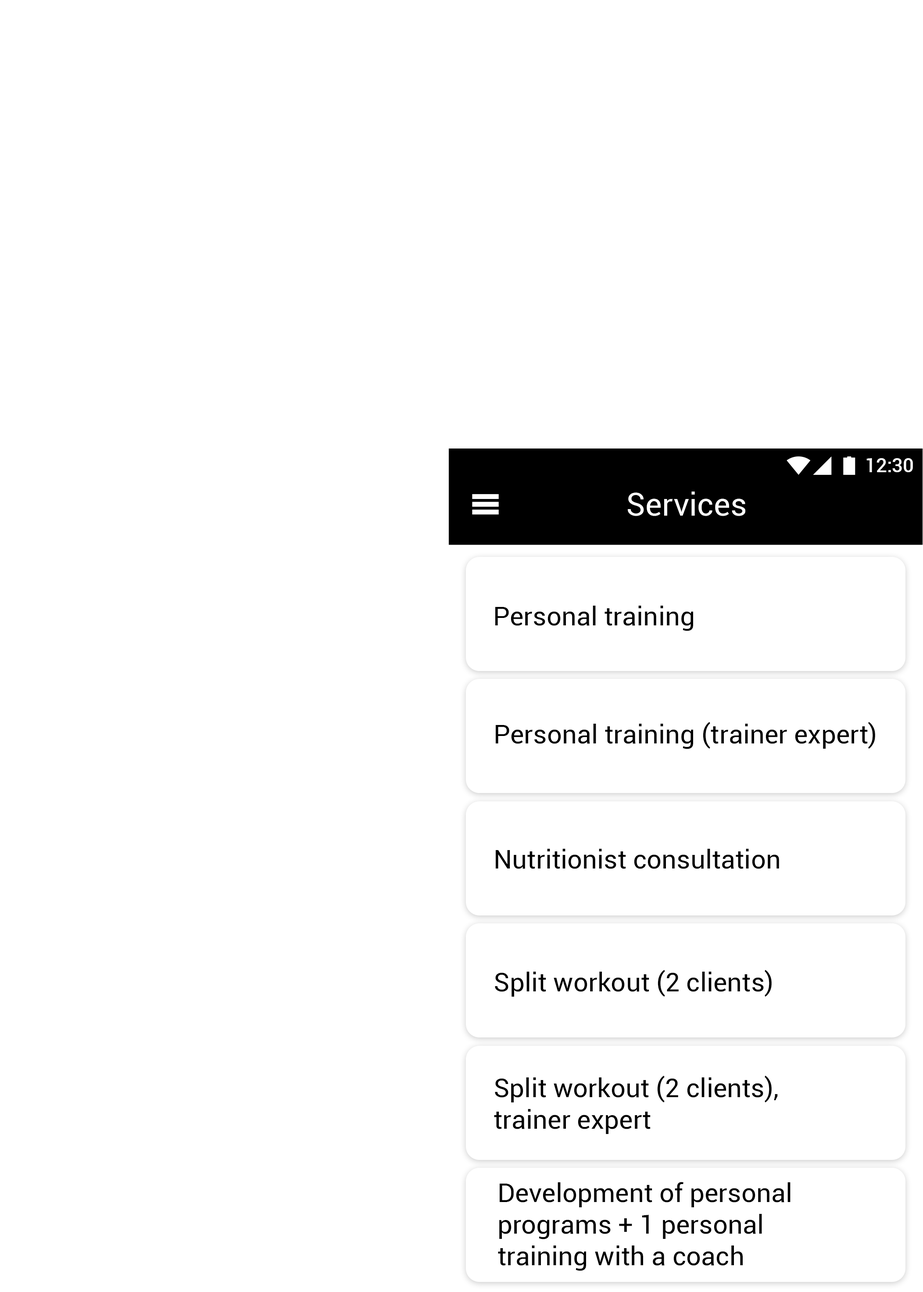
<style>
.page{position:relative;width:923px;height:1292px;background:#ffffff}
.page>*{position:absolute;margin:0}
.t1{font:19.3px "Roboto-Medium";color:#ffffff}
.t2{font:31.6px "Roboto-Regular";color:#ffffff}
.t3{font:26.3px "Roboto-Regular";color:#000000}
.t4{font:26.3px/31.6px "Roboto-Regular";color:#000000}
</style>
<div class="page">
<p class="t1" style="left:867px;top:458px;width:46px;height:14px">12:30</p>
<p class="t2" style="left:628px;top:491px;width:117px;height:25px">Services</p>
<p class="t3" style="left:495px;top:605px;width:198px;height:26px">Personal training</p>
<p class="t3" style="left:496px;top:722px;width:379px;height:27px">Personal training (trainer expert)</p>
<p class="t3" style="left:496px;top:849px;width:283px;height:20px">Nutritionist consultation</p>
<p class="t3" style="left:495px;top:970px;width:277px;height:26px">Split workout (2 clients)</p>
<p class="t4" style="left:494px;top:1075px;width:284px;height:59px">Split workout (2 clients), <br>trainer expert</p>
<p class="t4" style="left:498px;top:1182px;width:293px;height:89px">Development of personal<br>programs + 1 personal<br>training with a coach</p>
</div>
